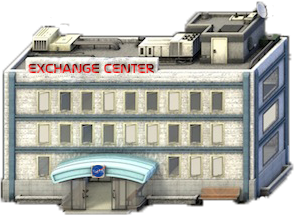
<style>
.page{position:relative;width:294px;height:216px}
.page>*{position:absolute;margin:0}
.t1{font:13px "NasalizationRg-Regular"}
</style>
<div class="page">
<p class="t1" style="left:28px;top:64px;width:126px;height:9px">Exchange Center</p>
</div>
